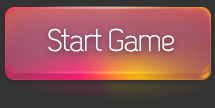
<style>
.page{position:relative;width:215px;height:108px}
.page>*{position:absolute;margin:0}
.t1{font:31.3px "Dekar";letter-spacing:-0.02em;color:#ffffff}
</style>
<div class="page">
<p class="t1" style="left:48px;top:28px;width:126px;height:24px">Start Game</p>
</div>
